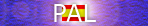
<style>
.page{position:relative;width:148px;height:26px}
.page>*{position:absolute;margin:0}
.t1{font:24px "Verdana";color:#ffffff}
</style>
<div class="page">
<p class="t1" style="left:54px;top:4px;width:42px;height:18px">PAL</p>
</div>
